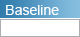
<style>
.page{position:relative;width:80px;height:37px;background:#ffffff}
.page>*{position:absolute;margin:0}
.t1{font:14px "ArialMT";color:#ffffff}
</style>
<div class="page">
<p class="t1" style="left:6px;top:5px;width:53px;height:10px">Baseline</p>
</div>
